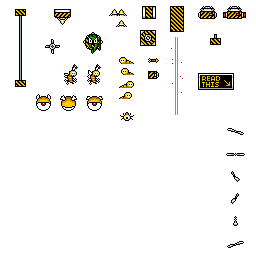
<style>
.page{position:relative;width:256px;height:256px;background:#ffffff}
.page>*{position:absolute;margin:0}
.t1{font:8px "04b03";text-transform:uppercase}
.t2{font:8px "04b03";color:#ffcc00;text-transform:uppercase}
</style>
<div class="page">
<p class="t1" style="left:202px;top:76px;width:18px;height:5px">READ</p>
<p class="t2" style="left:202px;top:82px;width:17px;height:5px">THIS</p>
</div>
